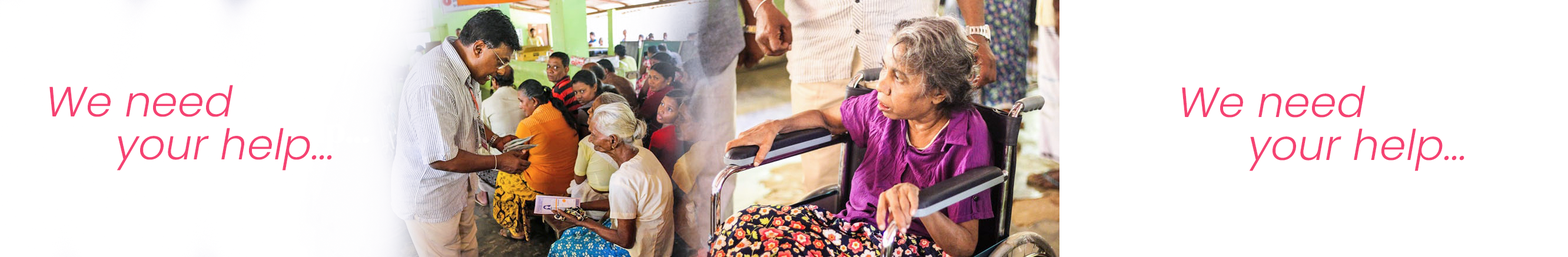
<style>
.page{position:relative;width:1568px;height:257px;background:#ffffff}
.page>*{position:absolute;margin:0}
.t1{font:42.4px "Poppins-LightItalic";color:#f54272}
</style>
<div class="page">
<p class="t1" style="left:49px;top:85px;width:184px;height:32px">We need</p>
<p class="t1" style="left:1182px;top:85px;width:184px;height:33px">We need</p>
<p class="t1" style="left:117px;top:128px;width:215px;height:43px">your help...</p>
<p class="t1" style="left:1249px;top:128px;width:215px;height:43px">your help...</p>
</div>
